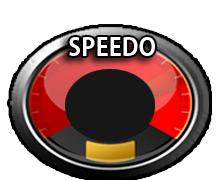
<style>
.page{position:relative;width:220px;height:180px;background:#ffffff}
.page>*{position:absolute;margin:0}
.t1{font:24px "AdobeGothicStd-Bold";color:#ffffff}
</style>
<div class="page">
<p class="t1" style="left:69px;top:37px;width:86px;height:19px">SPEEDO</p>
<p class="t1" style="left:69px;top:37px;width:86px;height:19px">SPEEDO</p>
</div>
